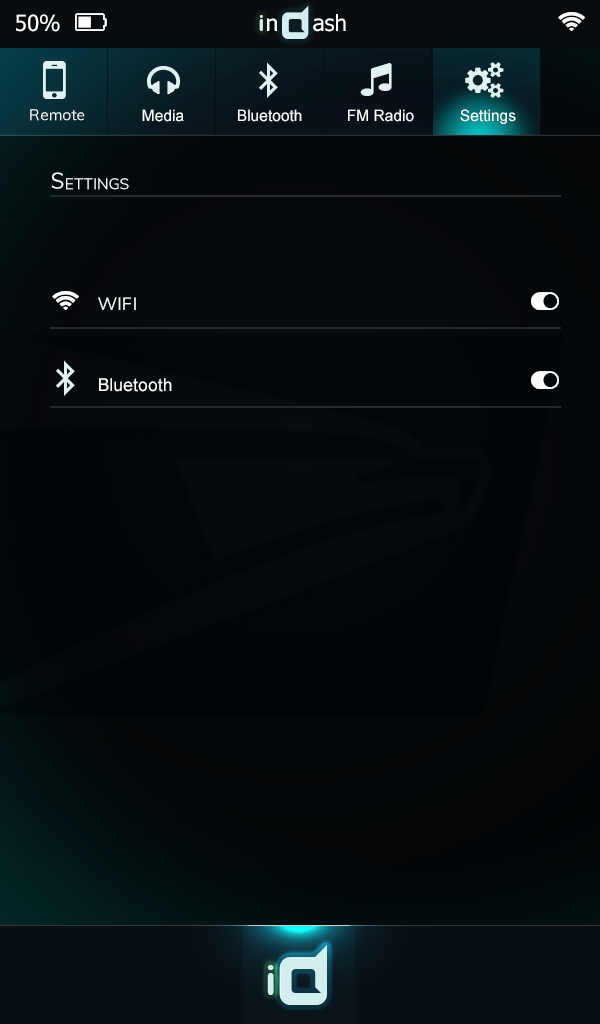
<style>
.page{position:relative;width:600px;height:1024px}
.page>*{position:absolute;margin:0}
.t1{font:22.2px "Tahoma";color:#ffffff}
.t2{font:23.4px "ArialRoundedMTBold";color:#d3eeee}
.t3{font:15.6px "ArialMT";color:#ffffff}
.t4{font:17.8px "ArialMT";color:#ffffff}
.t5{font:42.2px "ArialRoundedMTBold";color:#d3eeee}
</style>
<div class="page">
<p class="t1" style="left:16px;top:14px;width:44px;height:18px">50%</p>
<p class="t2" style="left:259px;top:15px;width:4px;height:16px">i</p>
<p class="t1" style="left:267px;top:14px;width:79px;height:18px">n     ash</p>
<p class="t3" style="left:142px;top:109px;width:42px;height:13px">Media</p>
<p class="t3" style="left:238px;top:109px;width:64px;height:13px">Bluetooth</p>
<p class="t3" style="left:348px;top:109px;width:66px;height:13px">FM Radio</p>
<p class="t3" style="left:460px;top:109px;width:56px;height:15px">Settings</p>
<p class="t4" style="left:99px;top:378px;width:73px;height:14px">Bluetooth</p>
<p class="t5" style="left:267px;top:965px;width:7px;height:30px">i</p>
</div>
